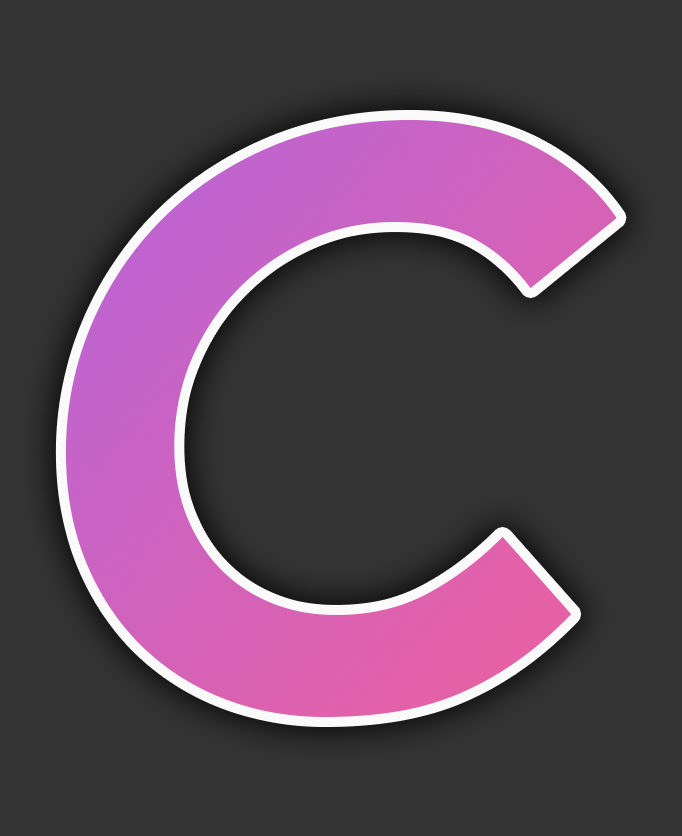
<style>
.page{position:relative;width:682px;height:836px;background:#333333}
.page>*{position:absolute;margin:0}
.t1{font:797px "ProductSans-BoldItalic";letter-spacing:-0.22em;color:#cd63c0}
</style>
<div class="page">
<p class="t1" style="left:65px;top:120px;width:552px;height:597px">C</p>
</div>
